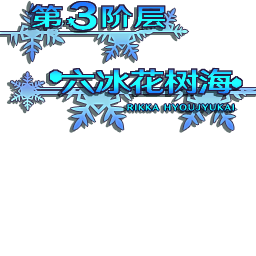
<style>
.page{position:relative;width:256px;height:256px;background:#ffffff}
.page>*{position:absolute;margin:0}
.t1{font:24.3px "HYWenHei-HEW";letter-spacing:0.052em;scale:1.34 1}
.t2{font:27.1px "HYWenHei-HEW";letter-spacing:-0.044em;scale:1.33 1}
</style>
<div class="page">
<p class="t1" style="left:31px;top:5px;width:134px;height:23px">第   阶层</p>
<p class="t2" style="left:61px;top:68px;width:172px;height:26px">六冰花树海</p>
</div>
